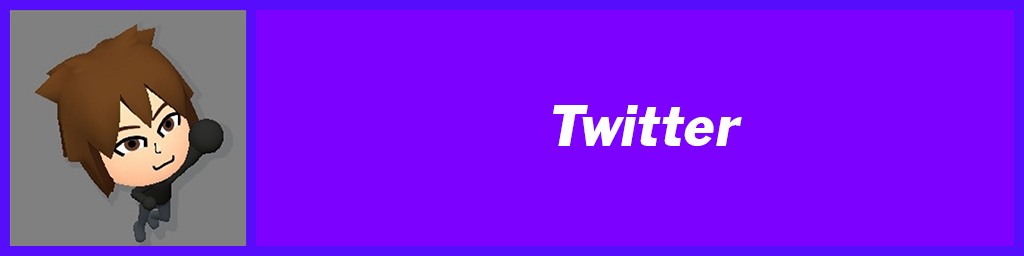
<style>
.page{position:relative;width:1024px;height:256px;background:#7d01ff}
.page>*{position:absolute;margin:0}
.t1{font:61.1px "FranklinGothicITALIC";color:#ffffff}
</style>
<div class="page">
<p class="t1" style="left:553px;top:105px;width:189px;height:41px">Twitter</p>
</div>
